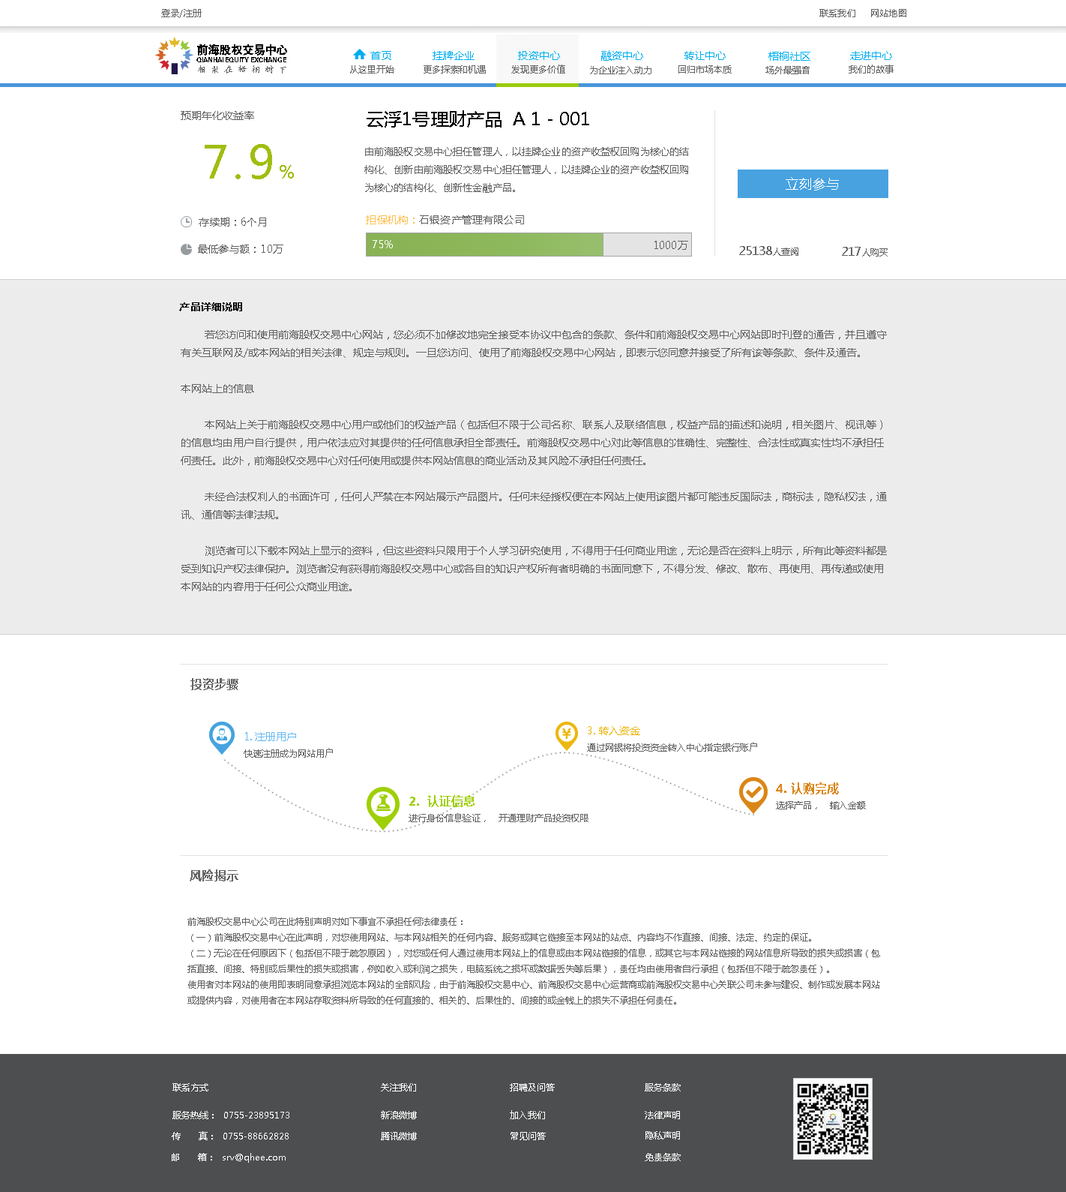
<style>
.page{position:relative;width:1066px;height:1192px;background:#ffffff}
.page>*{position:absolute;margin:0}
.t1{font:9px "MicrosoftYaHei";letter-spacing:0.025em;color:#636363}
.t2{font:12px "FZDHTK--GBK1-0";letter-spacing:-0.05em;color:#000000}
.t3{font:10.5px "MicrosoftYaHei";letter-spacing:0.075em;color:#00aeef}
.t4{font:10.5px "MicrosoftYaHei";color:#00aeef}
.t5{font:6.8px "FZDHTK--GBK1-0";color:#000000}
.t6{font:9px "STKaiti";letter-spacing:0.5em;color:#636363}
.t7{font:9px "MicrosoftYaHei";color:#636363}
.t8{font:10.5px "MicrosoftYaHei";color:#636363}
.t9{font:18px "MicrosoftYaHei";color:#000000}
.t10{font:45px "MicrosoftYaHei";letter-spacing:0.1em;color:#9fbe0f}
.t11{font:18px "MicrosoftYaHei";letter-spacing:0.1em;color:#9fbe0f}
.t12{font:9.8px/18px "MicrosoftYaHei";letter-spacing:0.01em;color:#636363}
.t13{font:13.5px "MicrosoftYaHei";color:#ffffff}
.t14{font:10.5px "MicrosoftYaHei";letter-spacing:0.01em;color:#636363}
.t15{font:10.5px "MicrosoftYaHei";letter-spacing:0.01em;color:#febe4a}
.t16{font:10.5px "MicrosoftYaHei";letter-spacing:0.01em;color:#ffffff}
.t17{font:12px "MicrosoftYaHei";color:#636363}
.t18{font:10.5px "MicrosoftYaHei-Bold";letter-spacing:0.01em;color:#000000}
.t19{font:10.5px/18px "MicrosoftYaHei";color:#636363}
.t20{font:12px "MicrosoftYaHei-Bold";color:#636363}
.t21{font:9px/17.2px "MicrosoftYaHei";color:#636363}
.t22{font:10.5px/17.2px "MicrosoftYaHei";color:#ecb710}
.t23{font:10.5px/17.2px "MicrosoftYaHei";color:#67baf1}
.t24{font:9px/18px "MicrosoftYaHei";color:#636363}
.t25{font:12px/18px "MicrosoftYaHei-Bold";color:#da8617}
.t26{font:12px/18px "MicrosoftYaHei-Bold";color:#9fcf05}
.t27{font:12px "MicrosoftYaHei-Bold";letter-spacing:0.025em;color:#636363}
.t28{font:9px "MicrosoftYaHei";color:#ffffff}
</style>
<div class="page">
<p class="t1" style="left:161px;top:9px;width:41px;height:9px">登录/注册</p>
<p class="t1" style="left:820px;top:9px;width:36px;height:8px">联系我们</p>
<p class="t1" style="left:872px;top:9px;width:35px;height:8px">网站地图</p>
<p class="t2" style="left:197px;top:44px;width:90px;height:12px">前海股权交易中心</p>
<p class="t3" style="left:370px;top:51px;width:22px;height:9px">首页</p>
<p class="t4" style="left:433px;top:51px;width:42px;height:9px">挂牌企业</p>
<p class="t4" style="left:518px;top:51px;width:42px;height:9px">投资中心</p>
<p class="t4" style="left:602px;top:50px;width:42px;height:11px">融资中心</p>
<p class="t4" style="left:685px;top:51px;width:41px;height:9px">转让中心</p>
<p class="t4" style="left:769px;top:52px;width:42px;height:9px">梧桐社区</p>
<p class="t4" style="left:850px;top:51px;width:42px;height:9px">走进中心</p>
<p class="t5" style="left:196px;top:57px;width:90px;height:5px">QIANHAI EQUITY EXCHANGE</p>
<p class="t6" style="left:198px;top:65px;width:88px;height:9px">相聚在梧桐树下</p>
<p class="t7" style="left:350px;top:65px;width:44px;height:9px">从这里开始</p>
<p class="t7" style="left:424px;top:65px;width:62px;height:9px">更多探索和机遇</p>
<p class="t7" style="left:512px;top:64px;width:54px;height:10px">发现更多价值</p>
<p class="t7" style="left:679px;top:65px;width:53px;height:9px">回归市场本质</p>
<p class="t7" style="left:849px;top:64px;width:45px;height:10px">我们的故事</p>
<p class="t7" style="left:590px;top:66px;width:62px;height:8px">为企业注入动力</p>
<p class="t7" style="left:766px;top:66px;width:44px;height:8px">场外最强音</p>
<p class="t8" style="left:181px;top:111px;width:73px;height:9px">预期年化收益率</p>
<p class="t9" style="left:367px;top:110px;width:223px;height:18px">云浮1号理财产品  A 1 - 001</p>
<p class="t10" style="left:205px;top:144px;width:89px;height:35px">7.9<span class="t11">%</span></p>
<p class="t12" style="left:364px;top:147px;width:325px;height:46px">由前海股权交易中心担任管理人，以挂牌企业的资产收益权回购为核心的结构化、创新由前海股权交易中心担任管理人，以挂牌企业的资产收益权回购为核心的结构化、创新性金融产品。</p>
<p class="t13" style="left:786px;top:177px;width:53px;height:13px">立刻参与</p>
<p class="t14" style="left:199px;top:218px;width:67px;height:8px">存续期：6个月</p>
<p class="t14" style="left:366px;top:215px;width:158px;height:9px"><span class="t15">担保机构：</span>石银资产管理有限公司</p>
<p class="t14" style="left:198px;top:244px;width:86px;height:10px">最低参与额：10万</p>
<p class="t16" style="left:373px;top:240px;width:20px;height:8px">75%</p>
<p class="t14" style="left:655px;top:241px;width:33px;height:9px">1000万</p>
<p class="t17" style="left:740px;top:246px;width:59px;height:10px">25138<span class="t7">人查阅</span></p>
<p class="t17" style="left:842px;top:247px;width:46px;height:9px">217<span class="t7">人购买</span></p>
<p class="t18" style="left:179px;top:302px;width:63px;height:9px">产品详细说明</p>
<p class="t19" style="left:181px;top:330px;width:706px;height:261px">若您访问和使用前海股权交易中心网站，您必须不加修改地完全接受本协议中包含的条款、条件和前海股权交易中心网站即时刊登的通告，并且遵守有关互联网及/或本网站的相关法律、规定与规则。一旦您访问、使用了前海股权交易中心网站，即表示您同意并接受了所有该等条款、条件及通告。<br><br>本网站上的信息<br><br>        本网站上关于前海股权交易中心用户或他们的权益产品（包括但不限于公司名称、联系人及联络信息，权益产品的描述和说明，相关图片、视讯等）的信息均由用户自行提供，用户依法应对其提供的任何信息承担全部责任。前海股权交易中心对此等信息的准确性、完整性、合法性或真实性均不承担任何责任。此外，前海股权交易中心对任何使用或提供本网站信息的商业活动及其风险不承担任何责任。<br><br>        未经合法权利人的书面许可，任何人严禁在本网站展示产品图片。任何未经授权便在本网站上使用该图片都可能违反国际法，商标法，隐私权法，通讯、通信等法律法规。<br><br>        浏览者可以下载本网站上显示的资料，但这些资料只限用于个人学习研究使用，不得用于任何商业用途，无论是否在资料上明示，所有此等资料都是受到知识产权法律保护。浏览者没有获得前海股权交易中心或各自的知识产权所有者明确的书面同意下，不得分发、修改、散布、再使用、再传递或使用本网站的内容用于任何公众商业用途。</p>
<p class="t20" style="left:190px;top:678px;width:48px;height:12px">投资步骤</p>
<p class="t21" style="left:587px;top:726px;width:171px;height:26px"><span class="t22">3. 转入资金<br></span>通过网银将投资资金转入中心指定银行账户</p>
<p class="t21" style="left:244px;top:732px;width:89px;height:26px"><span class="t23">1. 注册用户<br></span>快速注册成为网站用户</p>
<p class="t24" style="left:776px;top:782px;width:90px;height:27px"><span class="t25">4. 认购完成<br></span>选择产品，   输入金额</p>
<p class="t24" style="left:409px;top:795px;width:180px;height:27px"><span class="t26">2.  认证信息<br></span>进行身份信息验证，   开通理财产品投资权限</p>
<p class="t27" style="left:190px;top:869px;width:48px;height:12px">风险揭示</p>
<p class="t7" style="left:188px;top:916px;width:692px;height:88px">前海股权交易中心公司在此特别声明对如下事宜不承担任何法律责任：<br>（一）前海股权交易中心在此声明，对您使用网站、与本网站相关的任何内容、服务或其它链接至本网站的站点、内容均不作直接、间接、法定、约定的保证。<br>（二）无论在任何原因下（包括但不限于疏忽原因），对您或任何人通过使用本网站上的信息或由本网站链接的信息，或其它与本网站链接的网站信息所导致的损失或损害（包括直接、间接、特别或后果性的损失或损害，例如收入或利润之损失，电脑系统之损坏或数据丢失等后果），责任均由使用者自行承担（包括但不限于疏忽责任）。<br>使用者对本网站的使用即表明同意承担浏览本网站的全部风险，由于前海股权交易中心、前海股权交易中心运营商或前海股权交易中心关联公司未参与建设、制作或发展本网站或提供内容，对使用者在本网站存取资料所导致的任何直接的、相关的、后果性的、间接的或金钱上的损失不承担任何责任。</p>
<p class="t28" style="left:172px;top:1083px;width:36px;height:8px">联系方式</p>
<p class="t28" style="left:381px;top:1083px;width:35px;height:8px">关注我们</p>
<p class="t28" style="left:510px;top:1083px;width:45px;height:8px">招聘及问答</p>
<p class="t28" style="left:645px;top:1083px;width:36px;height:8px">服务条款</p>
<p class="t28" style="left:381px;top:1110px;width:36px;height:9px">新浪微博</p>
<p class="t28" style="left:510px;top:1110px;width:35px;height:9px">加入我们</p>
<p class="t28" style="left:172px;top:1111px;width:118px;height:8px">服务热线：  0755-23895173</p>
<p class="t28" style="left:645px;top:1111px;width:35px;height:8px">法律声明</p>
<p class="t28" style="left:172px;top:1131px;width:117px;height:9px">传      真：  0755-88662828</p>
<p class="t28" style="left:381px;top:1132px;width:36px;height:8px">腾讯微博</p>
<p class="t28" style="left:511px;top:1132px;width:35px;height:8px">常见问答</p>
<p class="t28" style="left:646px;top:1131px;width:34px;height:8px">隐私声明</p>
<p class="t28" style="left:172px;top:1153px;width:114px;height:9px">邮      箱：  srv@qhee.com</p>
<p class="t28" style="left:645px;top:1153px;width:36px;height:8px">免责条款</p>
</div>
